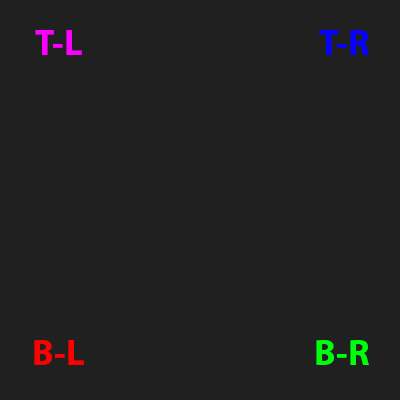
<style>
.page{position:relative;width:400px;height:400px;background:#202020}
.page>*{position:absolute;margin:0}
.t1{font:36px "MyriadPro-Bold";color:#fc00ff}
.t2{font:36px "MyriadPro-Bold";color:#0600ff}
.t3{font:36px "MyriadPro-Bold";color:#fe0000}
.t4{font:36px "MyriadPro-Bold";color:#00ff0c}
</style>
<div class="page">
<p class="t1" style="left:35px;top:30px;width:47px;height:25px">T-L</p>
<p class="t2" style="left:319px;top:30px;width:50px;height:25px">T-R</p>
<p class="t3" style="left:34px;top:340px;width:50px;height:25px">B-L</p>
<p class="t4" style="left:316px;top:340px;width:53px;height:25px">B-R</p>
</div>
